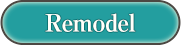
<style>
.page{position:relative;width:181px;height:45px;background:#239e9f}
.page>*{position:absolute;margin:0}
.t1{font:24px "RyuminPro-ExBold";letter-spacing:-0.04em;color:#fffffa}
</style>
<div class="page">
<p class="t1" style="left:45px;top:13px;width:91px;height:19px">Remodel</p>
</div>
